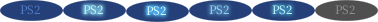
<style>
.page{position:relative;width:378px;height:22px;background:#254079}
.page>*{position:absolute;margin:0}
.t1{font:14px "OfficialFateFont-Medium";color:#507ac3}
.t2{font:14px "OfficialFateFont-Medium";color:#c1f1fc}
.t3{font:14px "OfficialFateFont-Medium";color:#cff7fe}
.t4{font:14px "OfficialFateFont-Medium";color:#8cd2f6}
.t5{font:14px "OfficialFateFont-Medium";color:#8d8d8d}
</style>
<div class="page">
<p class="t1" style="left:20px;top:5px;width:20px;height:10px">PS2</p>
<p class="t2" style="left:83px;top:5px;width:20px;height:10px">PS2</p>
<p class="t3" style="left:146px;top:6px;width:20px;height:10px">PS2</p>
<p class="t4" style="left:209px;top:5px;width:20px;height:10px">PS2</p>
<p class="t2" style="left:272px;top:5px;width:20px;height:10px">PS2</p>
<p class="t5" style="left:335px;top:5px;width:20px;height:10px">PS2</p>
</div>
